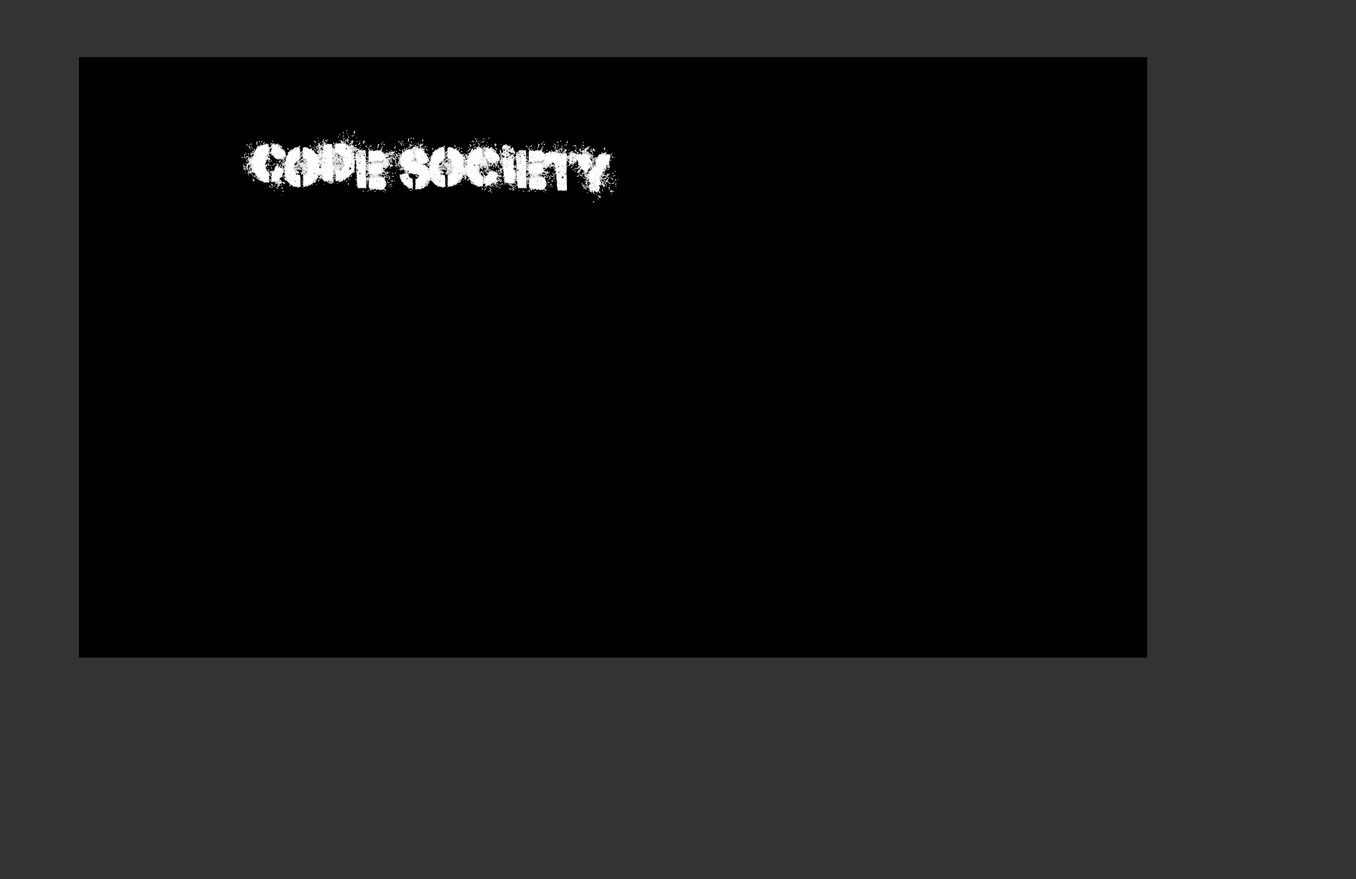
<style>
.page{position:relative;width:1356px;height:879px;background:#000000}
.page>*{position:absolute;margin:0}
.t1{font:56.3px "Misdemeanor";color:#ffffff;scale:0.97 1}
</style>
<div class="page">
<p class="t1" style="left:241px;top:130px;width:378px;height:73px">Code society</p>
</div>
